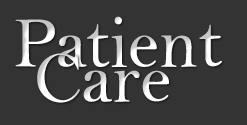
<style>
.page{position:relative;width:247px;height:125px;background:#333333}
.page>*{position:absolute;margin:0}
.t1{font:72px "BellMT";color:#ffffff}
.t2{font:72px "BellMT"}
</style>
<div class="page">
<p class="t1" style="left:15px;top:16px;width:207px;height:51px">Patient</p>
<p class="t2" style="left:37px;top:53px;width:132px;height:50px">Care</p>
</div>
